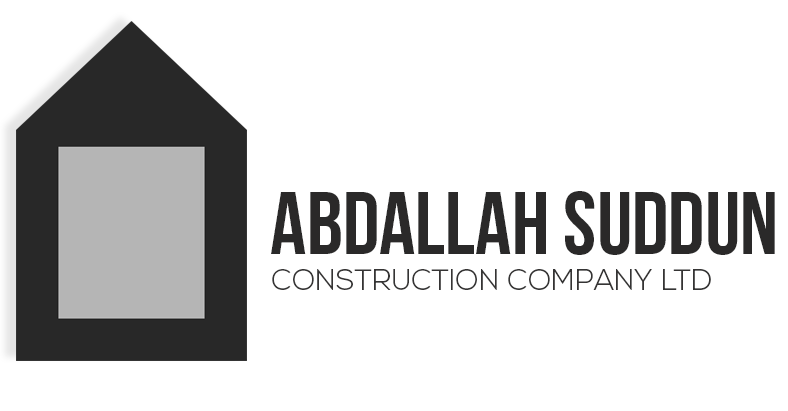
<style>
.page{position:relative;width:788px;height:411px;background:#ffffff}
.page>*{position:absolute;margin:0}
.t1{font:89px "BebasNeue";color:#2a2929;text-transform:uppercase}
.t2{font:29px "NexaLight";color:#353434;text-transform:uppercase}
</style>
<div class="page">
<p class="t1" style="left:271px;top:191px;width:504px;height:64px">abdallah suddun</p>
<p class="t2" style="left:272px;top:269px;width:439px;height:21px">construction company ltd</p>
</div>
